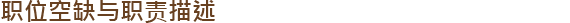
<style>
.page{position:relative;width:570px;height:23px;background:#ffffff}
.page>*{position:absolute;margin:0}
.t1{font:24px "MicrosoftJhengHeiBold";color:#684121}
</style>
<div class="page">
<p class="t1" style="left:1px;top:0px;width:214px;height:23px">职位空缺与职责描述</p>
</div>
